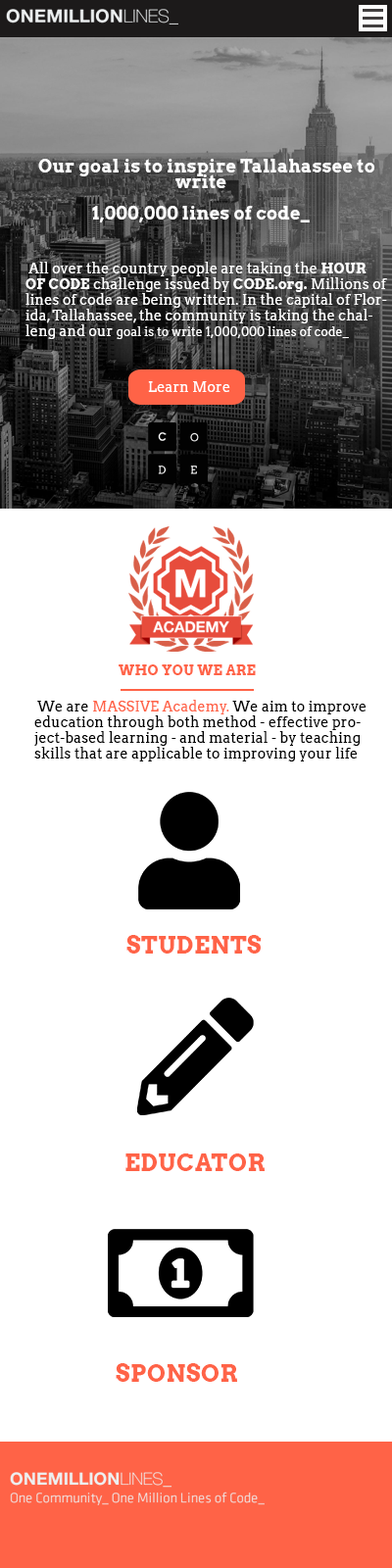
<style>
.page{position:relative;width:392px;height:1568px;background:#ffffff}
.page>*{position:absolute;margin:0}
.t1{font:17.6px/15.7px "Arvo-Bold";letter-spacing:0.02em;color:#ffffff}
.t2{font:13.7px/15.7px "Arvo";letter-spacing:0.02em;color:#ffffff}
.t3{font:13.7px/15.7px "Arvo-Bold";letter-spacing:0.02em;color:#ffffff}
.t4{font:11.8px/15.7px "Arvo";letter-spacing:0.02em;color:#ffffff}
.t5{font:13.7px "Arvo";letter-spacing:0.02em;color:#ffffff}
.t6{font:13.7px/15.7px "Arvo";letter-spacing:0.02em;color:#000000}
.t7{font:13.7px/15.7px "Arvo";letter-spacing:0.02em;color:#ff6347}
.t8{font:23.5px "Arvo-Bold";letter-spacing:0.02em;color:#ff6347}
</style>
<div class="page">
<p class="t1" style="left:38px;top:159px;width:337px;height:64px;text-align:center">Our goal is to inspire Tallahassee to write<br> <br>1,000,000 lines of code_</p>
<p class="t2" style="left:25px;top:262px;width:362px;height:77px">All over the country people are taking the <span class="t3">HOUR OF CODE</span> challenge issued by <span class="t3">CODE.org.</span> Millions of lines of code are being written. In the capital of Florida, Tallahassee, the community is taking the challeng and our <span class="t4">goal is to write 1,000,000 lines of code_</span></p>
<p class="t5" style="left:148px;top:381px;width:82px;height:11px">Learn More</p>
<p class="t6" style="left:34px;top:700px;width:333px;height:61px">We are <span class="t7">MASSIVE Academy.</span> We aim to improve education through both method - effective project-based learning - and material - by teaching skills that are applicable to improving your life today.<br><span class="t2">        that are applicable to improving your life today.</span><span class="t4">lines of code_</span></p>
<p class="t8" style="left:125px;top:1153px;width:140px;height:18px">EDUCATOR</p>
<p class="t8" style="left:116px;top:1363px;width:121px;height:19px">SPONSOR</p>
</div>
